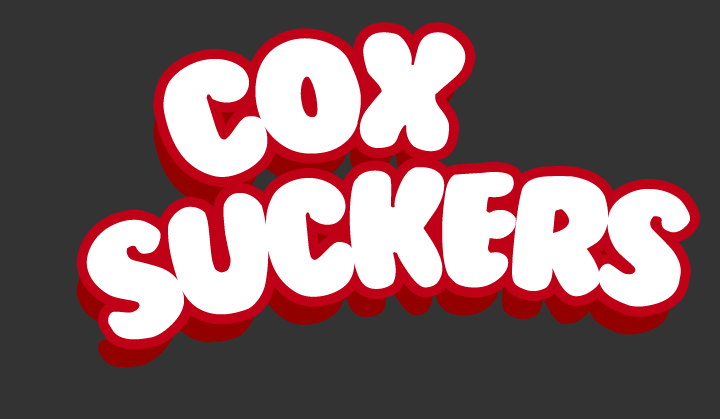
<style>
.page{position:relative;width:720px;height:419px;background:#333333}
.page>*{position:absolute;margin:0}
.t1{font:150px "BubbleGum";letter-spacing:-0.07em;color:#ffffff}
</style>
<div class="page">
<p class="t1" style="left:163px;top:32px;width:303px;height:145px;rotate:-9deg">Cox</p>
<p class="t1" style="left:86px;top:167px;width:604px;height:173px;rotate:-4deg">SUCKERS</p>
</div>
